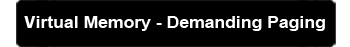
<style>
.page{position:relative;width:350px;height:47px;background:#000000}
.page>*{position:absolute;margin:0}
.t1{font:17.3px "Arial-BoldMT";color:#ffffff}
</style>
<div class="page">
<p class="t1" style="left:24px;top:16px;width:301px;height:15px">Virtual Memory - Demanding Paging</p>
</div>
